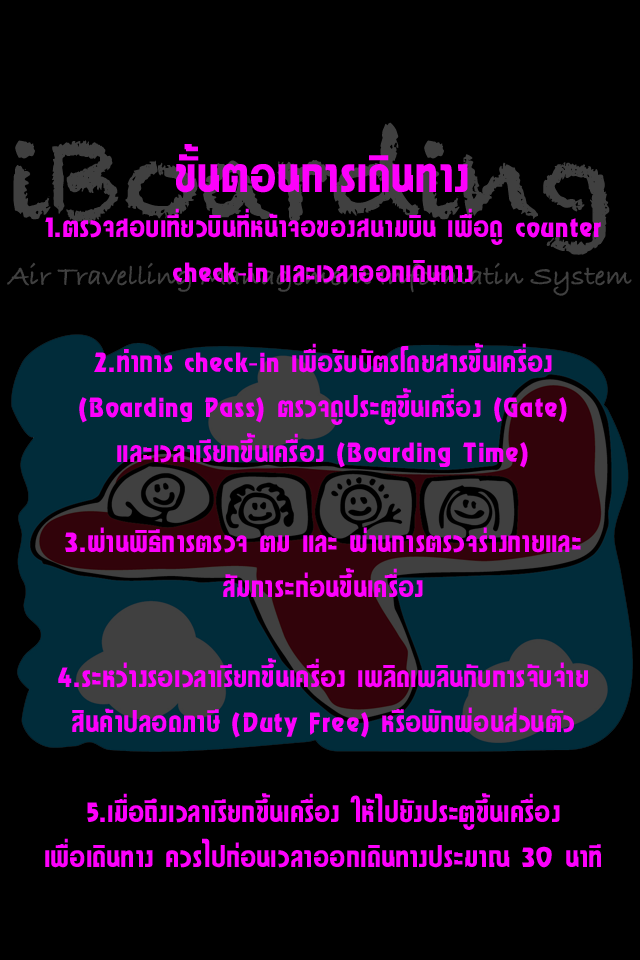
<style>
.page{position:relative;width:640px;height:960px;background:#000000}
.page>*{position:absolute;margin:0}
.t1{font:108.3px "Chalkduster";color:#404040}
.t2{font:108.3px "BradleyHandITCTTBold";color:#404040}
.t3{font:37.5px "JSBoaboon";color:#fd00fc}
.t4{font:62.5px "JSBoaboon";color:#fd00fc}
.t5{font:29.2px "BradleyHandITCTTBold";color:#404040}
</style>
<div class="page">
<p class="t1" style="left:13px;top:122px;width:597px;height:133px"><span class="t2"> </span>iBoarding</p>
<p class="t3" style="left:45px;top:144px;width:556px;height:724px;text-align:center"><span class="t4">ขั้นตอนการเดินทาง<br></span>1.ตรวจสอบเที่ยวบินที่หน้าจอของสนามบิน เพื่อดู counter check-in และเวลาออกเดินทาง<br><br>2.ทำการ check-in เพื่อรับบัตรโดยสารขึ้นเครื่อง<br>(Boarding Pass) ตรวจดูประตูขึ้นเครื่อง (Gate)<br>และเวลาเรียกขึ้นเครื่อง (Boarding Time)<br><br>3.ผ่านพิธีการตรวจ ตม และ ผ่านการตรวจร่างกายและ สัมภาระก่อนขึ้นเครื่อง<br><br>4.ระหว่างรอเวลาเรียกขึ้นเครื่อง เพลิดเพลินกับการจับจ่าย<br>สินค้าปลอดภาษี (Duty Free) หรือพักผ่อนส่วนตัว<br><br>5.เมื่อถึงเวลาเรียกขึ้นเครื่อง ให้ไปยังประตูขึ้นเครื่อง<br>เพื่อเดินทาง ควรไปก่อนเวลาออกเดินทางประมาณ 30 นาที</p>
<p class="t5" style="left:7px;top:262px;width:625px;height:34px">Air Travelling Management Informatin System</p>
</div>
